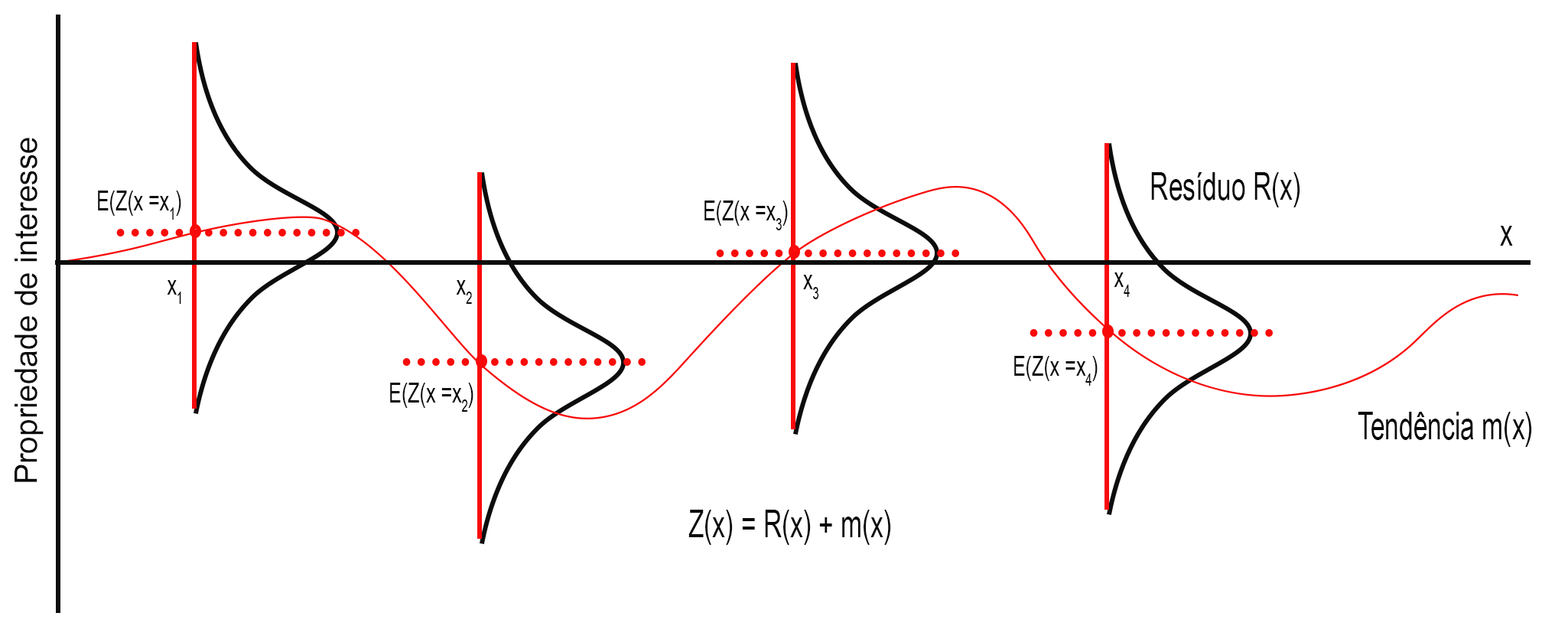
<style>
.page{position:relative;width:1568px;height:626px;background:#ffffff}
.page>*{position:absolute;margin:0}
.t1{font:53.7px "ArialNarrow";color:#090909;scale:1.21 1}
.t2{font:65.2px "ArialNarrow";color:#090909;scale:0.82 1}
.t3{font:28.4px "ArialNarrow";color:#090909;scale:0.82 1}
</style>
<div class="page">
<p class="t1" style="left:15px;top:138px;width:29px;height:344px;rotate:-90deg">Propriedade de interesse</p>
<p class="t2" style="left:1151px;top:172px;width:149px;height:35px">Resíduo R(x)</p>
<p class="t3" style="left:98px;top:190px;width:83px;height:30px">E(Z(x =x1)</p>
<p class="t3" style="left:704px;top:200px;width:84px;height:30px">E(Z(x =x3)</p>
<p class="t2" style="left:1500px;top:226px;width:13px;height:20px">x</p>
<p class="t3" style="left:167px;top:280px;width:14px;height:24px">x1</p>
<p class="t3" style="left:456px;top:280px;width:16px;height:24px">x2</p>
<p class="t3" style="left:803px;top:275px;width:16px;height:24px">x3</p>
<p class="t3" style="left:1114px;top:272px;width:16px;height:25px">x4</p>
<p class="t3" style="left:1014px;top:356px;width:84px;height:29px">E(Z(x =x4)</p>
<p class="t3" style="left:390px;top:382px;width:83px;height:30px">E(Z(x =x2)</p>
<p class="t2" style="left:1358px;top:412px;width:174px;height:35px">Tendência m(x)</p>
<p class="t2" style="left:688px;top:509px;width:203px;height:36px">Z(x) = R(x) + m(x)</p>
</div>
